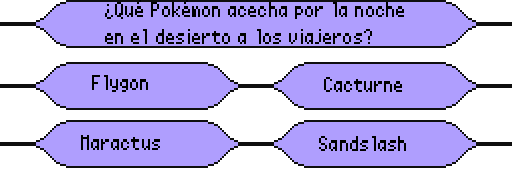
<style>
.page{position:relative;width:512px;height:174px;background:#af9efe}
.page>*{position:absolute;margin:0}
.t1{font:22.7px/26.7px "Power-Green-Small";letter-spacing:0.004em;color:#000000}
.t2{font:22.7px "Power-Green-Small";letter-spacing:0.004em;color:#000000}
</style>
<div class="page">
<p class="t1" style="left:105px;top:0px;width:299px;height:44px">¿Qué Pokémon acecha por la noche <br>en el desierto a los viajeros?</p>
<p class="t2" style="left:92px;top:75px;width:56px;height:17px">Flygon</p>
<p class="t2" style="left:324px;top:77px;width:78px;height:15px">Cacturne</p>
<p class="t2" style="left:81px;top:135px;width:79px;height:15px">Maractus</p>
<p class="t2" style="left:319px;top:136px;width:87px;height:15px">Sandslash</p>
</div>
